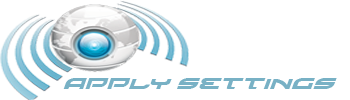
<style>
.page{position:relative;width:350px;height:100px;background:#ffffff}
.page>*{position:absolute;margin:0}
.t1{font:17.8px "BattlefieldExpandedItalic";color:#78b1c5;scale:0.96 1}
</style>
<div class="page">
<p class="t1" style="left:63px;top:78px;width:274px;height:11px">Apply settings</p>
</div>
